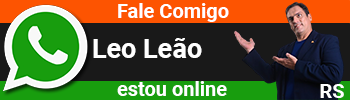
<style>
.page{position:relative;width:350px;height:100px;background:#191919}
.page>*{position:absolute;margin:0}
.t1{font:20px "Roboto-Bold";color:#ffffff}
.t2{font:27px "Roboto-Bold";color:#ffffff}
</style>
<div class="page">
<p class="t1" style="left:118px;top:3px;width:111px;height:19px">Fale Comigo</p>
<p class="t2" style="left:93px;top:38px;width:109px;height:20px">Leo Leão</p>
<p class="t1" style="left:117px;top:81px;width:110px;height:15px">estou online</p>
<p class="t1" style="left:320px;top:84px;width:24px;height:14px">RS</p>
</div>
